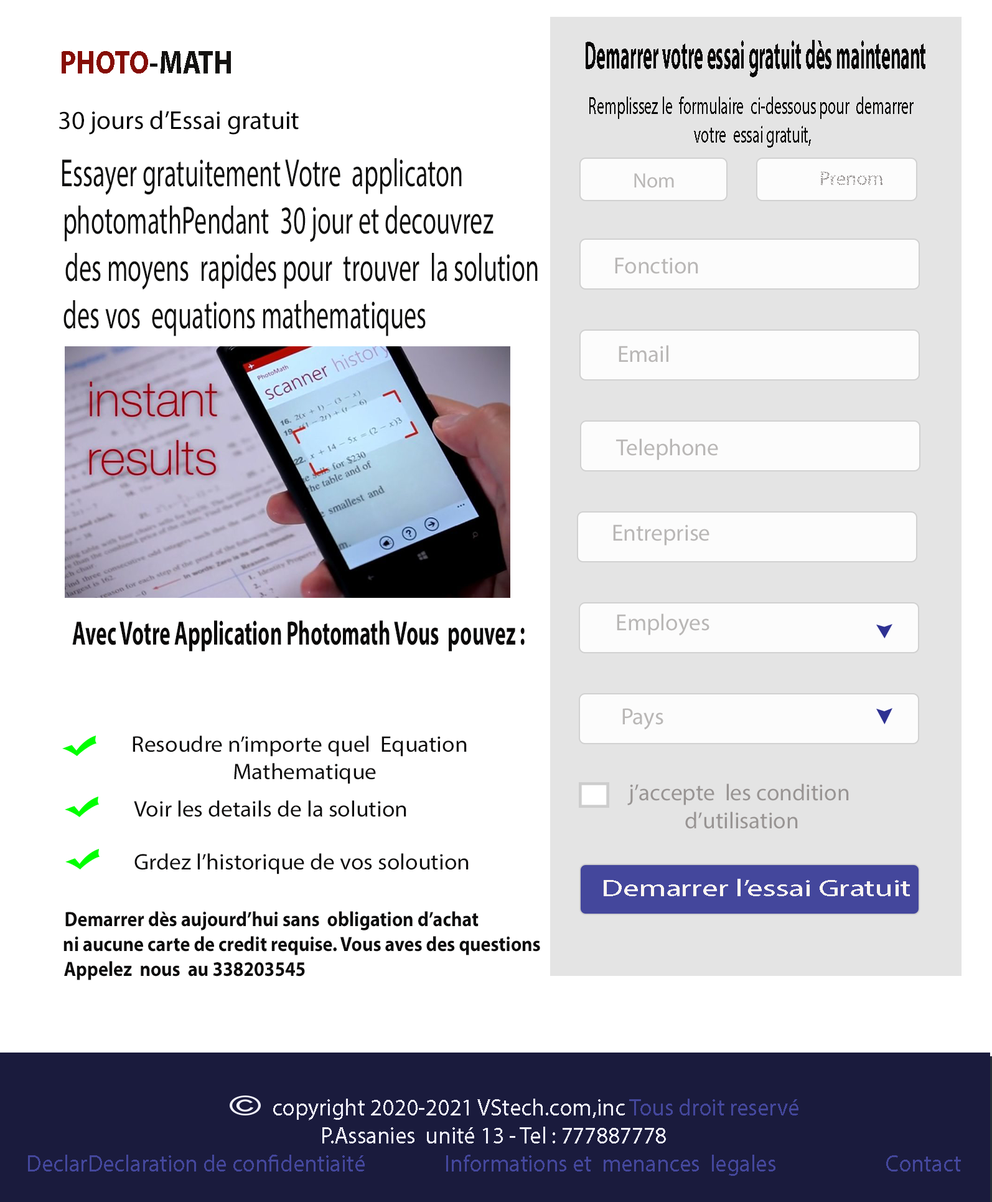
<style>
.page{position:relative;width:992px;height:1202px;background:#ffffff}
.page>*{position:absolute;margin:0}
.t1{font:40px "MyriadPro-Bold";color:#080707;scale:0.43 1}
.t2{font:32.8px "MyriadPro-Bold";color:#860e07;scale:0.85 1}
.t3{font:32.8px "MyriadPro-Bold";color:#131211;scale:0.85 1}
.t4{font:24.3px "MyriadPro-Regular";color:#080807;scale:0.62 1}
.t5{font:25.9px "MyriadPro-Regular";color:#020202}
.t6{font:39.5px "MyriadPro-Regular";color:#0f0f0e;scale:0.64 1}
.t7{font:20.8px "MyriadPro-Regular";color:#b9b7b6}
.t8{font:19.5px "MyriadPro-Regular";color:#989493}
.t9{font:23.3px "MyriadPro-Regular";color:#b9b7b6}
.t10{font:34px "MyriadPro-Bold";color:#0b0a0a;scale:0.61 1}
.t11{font:22.5px "MyriadPro-Regular";color:#0d0c0c;scale:1.04 1}
.t12{font:23.3px "MyriadPro-Regular";color:#989493}
.t13{font:23.9px "MyriadPro-Regular";color:#faf4f1;scale:1.34 1}
.t14{font:20.8px "MyriadPro-Bold";color:#0d0c0c;scale:0.9 1}
.t15{font:23.3px "MyriadPro-Regular";color:#44479c}
.t16{font:32.8px "MyriadPro-Regular";color:#f1f1fb}
.t17{font:23.3px "MyriadPro-Regular";color:#f1f1fb}
</style>
<div class="page">
<p class="t1" style="left:586px;top:40px;width:340px;height:37px">Demarrer votre essai gratuit dès maintenant</p>
<p class="t2" style="left:62px;top:51px;width:169px;height:22px">PHOTO<span class="t3">-MATH</span></p>
<p class="t4" style="left:590px;top:96px;width:324px;height:52px;text-align:center">Remplissez le  formulaire  ci-dessous pour  demarrer <br>votre  essai gratuit,</p>
<p class="t5" style="left:59px;top:110px;width:240px;height:24px">30 jours d’Essai gratuit</p>
<p class="t6" style="left:62px;top:158px;width:476px;height:178px;text-align:center">Essayer gratuitement Votre  applicaton <br>      photomathPendant  30 jour et decouvrez <br>               des moyens  rapides pour  trouver  la solution <br>des vos  equations mathematiques</p>
<p class="t7" style="left:634px;top:173px;width:40px;height:15px">Nom</p>
<p class="t8" style="left:821px;top:171px;width:62px;height:15px">Prenom</p>
<p class="t9" style="left:615px;top:257px;width:84px;height:17px">Fonction</p>
<p class="t9" style="left:619px;top:345px;width:50px;height:17px">Email</p>
<p class="t9" style="left:616px;top:438px;width:102px;height:22px">Telephone</p>
<p class="t9" style="left:613px;top:524px;width:97px;height:21px">Entreprise</p>
<p class="t9" style="left:617px;top:613px;width:93px;height:23px">Employes</p>
<p class="t10" style="left:72px;top:620px;width:453px;height:31px">Avec Votre Application Photomath Vous  pouvez :</p>
<p class="t9" style="left:623px;top:708px;width:41px;height:22px">Pays</p>
<p class="t11" style="left:133px;top:735px;width:334px;height:49px;text-align:center">Resoudre n’importe quel  Equation  <br>Mathematique</p>
<p class="t12" style="left:628px;top:783px;width:221px;height:46px;text-align:center">j’accepte  les condition<br> d’utilisation</p>
<p class="t11" style="left:134px;top:800px;width:273px;height:17px">Voir les details de la solution</p>
<p class="t11" style="left:134px;top:853px;width:335px;height:21px">Grdez l’historique de vos soloution</p>
<p class="t13" style="left:604px;top:878px;width:306px;height:18px">Demarrer l’essai Gratuit</p>
<p class="t14" style="left:64px;top:911px;width:476px;height:69px;text-align:center">Demarrer dès aujourd’hui sans  obligation d’achat               <br> ni aucune carte de credit requise. Vous aves des questions<br> Appelez  nous  au 338203545</p>
<p class="t15" style="left:28px;top:1098px;width:933px;height:77px;text-align:center"><span class="t16">            <br>            </span><span class="t17">copyright 2020-2021 VStech.com,inc </span>Tous droit reservé<br><span class="t17">P.Assanies  unité 13 - Tel : 777887778<br></span>DeclarDeclaration de confidentiaité                Informations et  menances  legales                      Contact</p>
</div>
